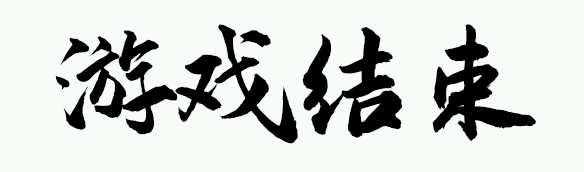
<style>
.page{position:relative;width:584px;height:172px;background:#f8fcf8}
.page>*{position:absolute;margin:0}
.t1{font:133.3px "zihun110hao-wulinjianghuti-Regular";letter-spacing:-0.1em;color:#000000}
</style>
<div class="page">
<p class="t1" style="left:55px;top:24px;width:481px;height:120px">游戏结束</p>
</div>
